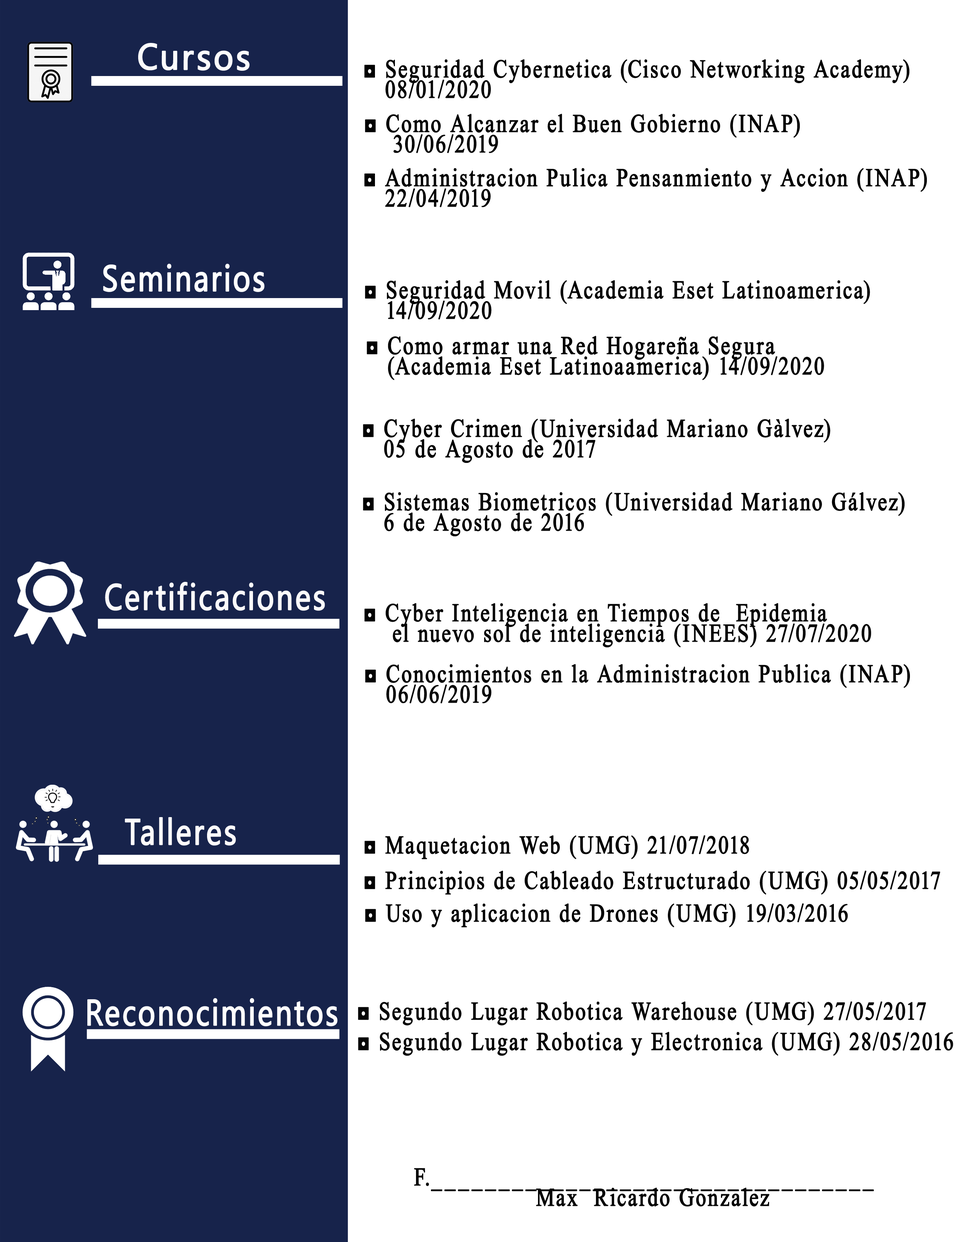
<style>
.page{position:relative;width:960px;height:1242px;background:#ffffff}
.page>*{position:absolute;margin:0}
.t1{font:33.9px "MicrosoftYaHei";letter-spacing:0.075em;color:#fbfbfc;font-weight:bold;scale:0.93 1}
.t2{font:25.4px/20.4px "TimesNewRomanPSMT";letter-spacing:0.075em;color:#020202;font-weight:bold;scale:0.81 1}
.t3{font:34px "MicrosoftYaHei";letter-spacing:0.075em;color:#ffffff;font-weight:bold;scale:0.81 1}
.t4{font:33.9px "MicrosoftYaHei";letter-spacing:0.075em;color:#fbfafa;font-weight:bold;scale:0.81 1}
.t5{font:25.4px/20.4px "TimesNewRomanPSMT";letter-spacing:0.075em;color:#040404;font-weight:bold;scale:0.81 1}
.t6{font:33.9px "MicrosoftYaHei";letter-spacing:0.075em;color:#fdfbfb;font-weight:bold;scale:0.81 1}
.t7{font:25.4px "TimesNewRomanPSMT";letter-spacing:0.075em;color:#030303;font-weight:bold;scale:0.81 1}
.t8{font:33.9px "MicrosoftYaHei";letter-spacing:0.075em;color:#fffefe;font-weight:bold;scale:0.81 1}
.t9{font:25.4px "TimesNewRomanPSMT";letter-spacing:0.075em;color:#040404;font-weight:bold;scale:0.81 1}
</style>
<div class="page">
<p class="t1" style="left:138px;top:43px;width:112px;height:28px">Cursos</p>
<p class="t2" style="left:364px;top:59px;width:545px;height:40px">◘ Seguridad Cybernetica (Cisco Networking Academy)<br>   08/01/2020</p>
<p class="t2" style="left:365px;top:114px;width:435px;height:39px">◘ Como Alcanzar el Buen Gobierno (INAP)<br>    30/06/2019</p>
<p class="t2" style="left:364px;top:168px;width:563px;height:39px">◘ Administracion Pulica Pensanmiento y Accion (INAP)<br>   22/04/2019</p>
<p class="t3" style="left:103px;top:264px;width:162px;height:28px">Seminarios</p>
<p class="t2" style="left:365px;top:280px;width:505px;height:40px">◘ Seguridad Movil (Academia Eset Latinoamerica)<br>   14/09/2020</p>
<p class="t2" style="left:367px;top:336px;width:457px;height:44px">◘ Como armar una Red Hogareña Segura <br>   (Academia Eset Latinoaamerica) 14/09/2020</p>
<p class="t2" style="left:363px;top:419px;width:467px;height:44px">◘ Cyber Crimen (Universidad Mariano Gàlvez)<br>   05 de Agosto de 2017</p>
<p class="t2" style="left:363px;top:492px;width:542px;height:44px">◘ Sistemas Biometricos (Universidad Mariano Gálvez) <br>   6 de Agosto de 2016</p>
<p class="t4" style="left:105px;top:582px;width:220px;height:29px">Certificaciones</p>
<p class="t5" style="left:364px;top:603px;width:507px;height:44px">◘ Cyber Inteligencia en Tiempos de  Epidemia<br>    el nuevo sol de inteligencia (INEES) 27/07/2020</p>
<p class="t5" style="left:365px;top:664px;width:545px;height:40px">◘ Conocimientos en la Administracion Publica (INAP)<br>   06/06/2019</p>
<p class="t6" style="left:125px;top:817px;width:111px;height:29px">Talleres</p>
<p class="t7" style="left:364px;top:835px;width:385px;height:24px">◘ Maquetacion Web (UMG) 21/07/2018</p>
<p class="t7" style="left:364px;top:871px;width:576px;height:24px">◘ Principios de Cableado Estructurado (UMG) 05/05/2017</p>
<p class="t7" style="left:365px;top:903px;width:483px;height:25px">◘ Uso y aplicacion de Drones (UMG) 19/03/2016</p>
<p class="t8" style="left:87px;top:998px;width:251px;height:29px">Reconocimientos</p>
<p class="t9" style="left:358px;top:1002px;width:568px;height:24px">◘ Segundo Lugar Robotica Warehouse (UMG) 27/05/2017</p>
<p class="t9" style="left:358px;top:1032px;width:595px;height:24px">◘ Segundo Lugar Robotica y Electronica (UMG) 28/05/2016</p>
<p class="t5" style="left:414px;top:1168px;width:460px;height:39px">F._________________________________<br>         Max  Ricardo Gonzalez</p>
</div>
